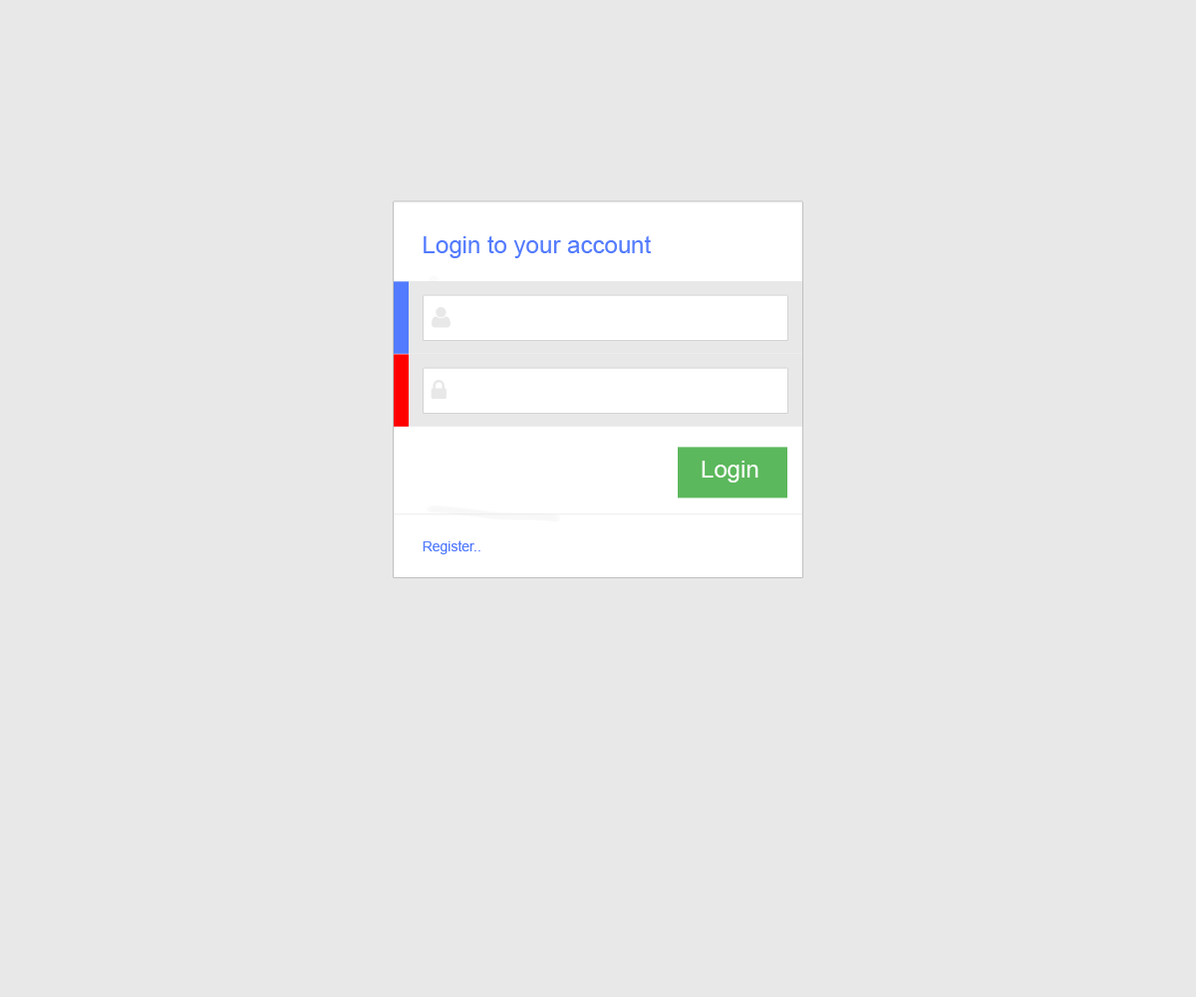
<style>
.page{position:relative;width:1196px;height:997px;background:#e8e8e8}
.page>*{position:absolute;margin:0}
.t1{font:23.9px "ArialMT";color:#537bff}
.t2{font:23.9px "ArialMT";color:#ffffff}
.t3{font:14px "ArialMT";color:#537bff}
</style>
<div class="page">
<p class="t1" style="left:424px;top:235px;width:227px;height:23px">Login to your account</p>
<p class="t2" style="left:702px;top:461px;width:57px;height:21px">Login</p>
<p class="t3" style="left:423px;top:540px;width:57px;height:14px">Register..</p>
</div>
